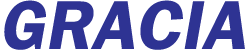
<style>
.page{position:relative;width:250px;height:50px;background:#2e3393}
.page>*{position:absolute;margin:0}
.t1{font:109.9px "FreesiaUPCBoldItalic";color:#2e3393}
</style>
<div class="page">
<p class="t1" style="left:4px;top:0px;width:241px;height:50px">GRACIA</p>
</div>
